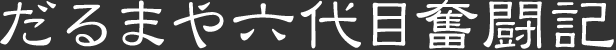
<style>
.page{position:relative;width:616px;height:50px;background:#333333}
.page>*{position:absolute;margin:0}
.t1{font:68px "DFLeiSho-SB-MP-RKSJ-H";color:#ffffff}
.t2{font:68px "DFLeiSho-SB-MP-RKSJ-H";letter-spacing:-0.1em;color:#ffffff}
.t3{font:68px "DFLeiSho-SB-MP-RKSJ-H";letter-spacing:-0.2em;color:#ffffff}
.t4{font:68px "DFLeiSho-SB-MP-RKSJ-H";letter-spacing:-0.15em;color:#ffffff}
.t5{font:68px "DFLeiSho-SB-MP-RKSJ-H";letter-spacing:-0.05em;color:#ffffff}
</style>
<div class="page">
<p class="t1" style="left:0px;top:0px;width:614px;height:49px"><span class="t2">だ</span><span class="t3">る</span><span class="t4">ま</span><span class="t5">や</span>六<span class="t4">代目</span>奮闘記</p>
</div>
